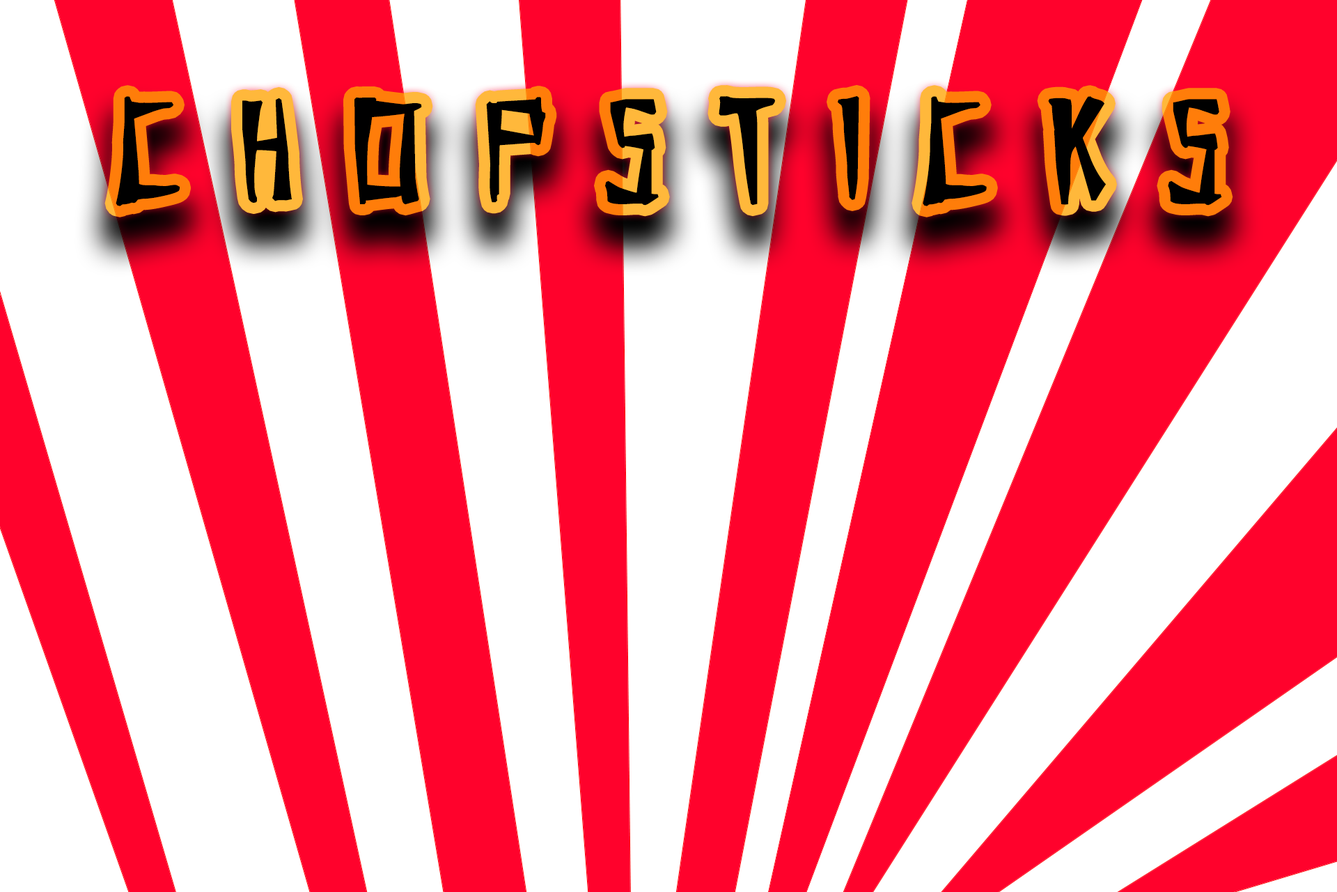
<style>
.page{position:relative;width:1337px;height:892px;background:#ffffff}
.page>*{position:absolute;margin:0}
.t1{font:111.5px "ChangandEng";color:#000000;font-weight:bold}
</style>
<div class="page">
<p class="t1" style="left:116px;top:96px;width:1106px;height:110px">C h o p s t i c k s</p>
</div>
